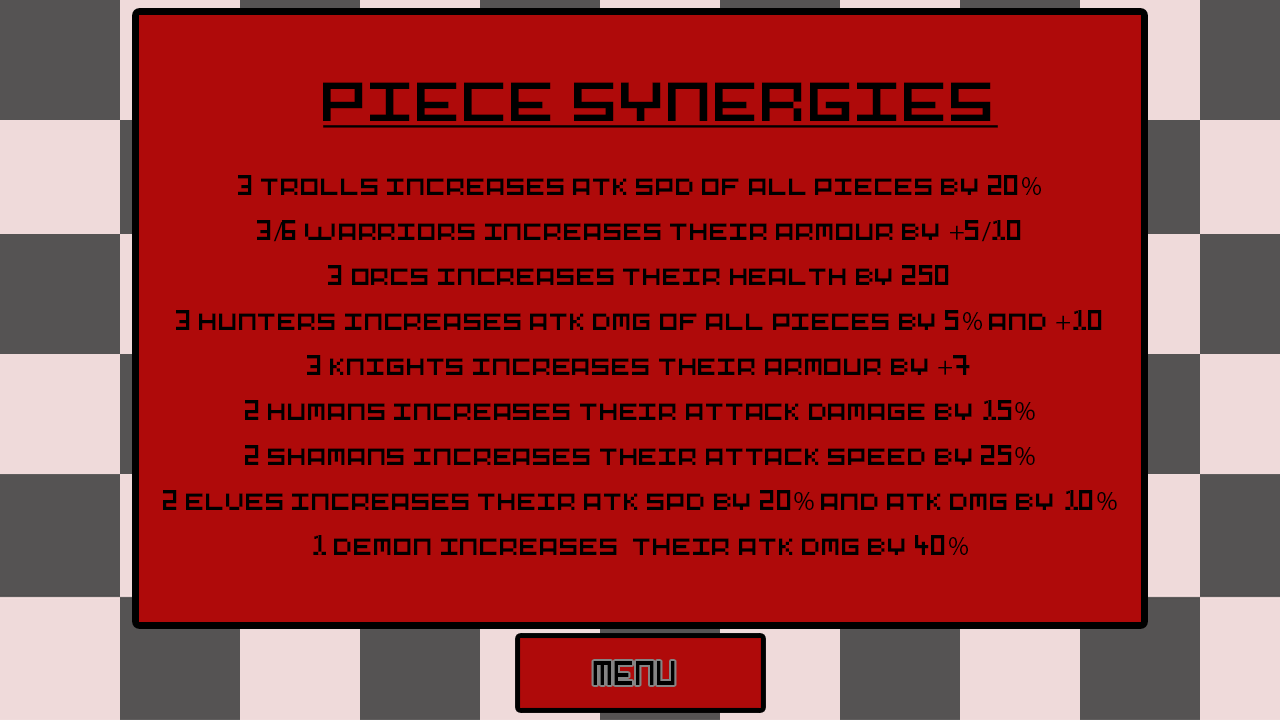
<style>
.page{position:relative;width:1280px;height:720px;background:#af0a0a}
.page>*{position:absolute;margin:0}
.t1{font:51.2px "MyFontRegular";color:#000000;text-decoration:underline;scale:1.23 1}
.t2{font:26.5px/45px "MyFontRegular";color:#000000}
.t3{font:26.5px/45px "MyriadPro-Regular";color:#000000}
.t4{font:32px "Pixel-Art";color:#000000;scale:0.88 1}
</style>
<div class="page">
<p class="t1" style="left:323px;top:82px;width:675px;height:46px">PIECE SYNERGIES</p>
<p class="t2" style="left:163px;top:175px;width:954px;height:380px;text-align:center">3 trolls increases atk spd of all pieces by 20<span class="t3">%</span><br>3<span class="t3">/</span>6 warriors increases their armour by <span class="t3">+</span>5<span class="t3">/</span>10<br>3 orcs increases their health by 250<br>3 hunters increases atk dmg of all pieces by 5<span class="t3">%</span> and <span class="t3">+</span>10<br>3 knights increases their armour by <span class="t3">+</span>7<br>2 humans increases their attack damage by 15<span class="t3">%</span><br>2 shamans increases their attack speed by 25<span class="t3">%</span><br>2 elves increases their atk spd by 20<span class="t3">%</span> and atk dmg by 10<span class="t3">%</span><br>1 demon increases  their atk dmg by 40<span class="t3">%</span></p>
<p class="t4" style="left:593px;top:661px;width:82px;height:24px">MENU</p>
</div>
